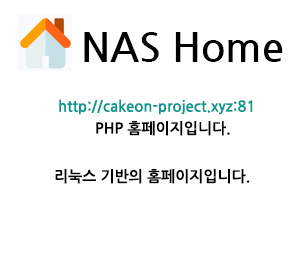
<style>
.page{position:relative;width:300px;height:280px;background:#ffffff}
.page>*{position:absolute;margin:0}
.t1{font:40px "NanumGothicBold";color:#000000}
.t2{font:15px "NanumGothicBold";color:#0a978f}
.t3{font:15px "NanumGothicBold";color:#000000}
</style>
<div class="page">
<p class="t1" style="left:84px;top:32px;width:199px;height:30px">NAS Home</p>
<p class="t2" style="left:59px;top:99px;width:194px;height:16px">http://cakeon-project.xyz:81</p>
<p class="t3" style="left:96px;top:121px;width:134px;height:15px">PHP 홈페이지입니다.</p>
<p class="t3" style="left:55px;top:169px;width:195px;height:15px">리눅스 기반의 홈페이지입니다.</p>
</div>
